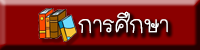
<style>
.page{position:relative;width:200px;height:50px;background:#8a0000}
.page>*{position:absolute;margin:0}
.t1{font:36px "THMaliGrade6-Bold";color:#fefefe}
</style>
<div class="page">
<p class="t1" style="left:78px;top:11px;width:90px;height:23px">การศึกษา</p>
</div>
